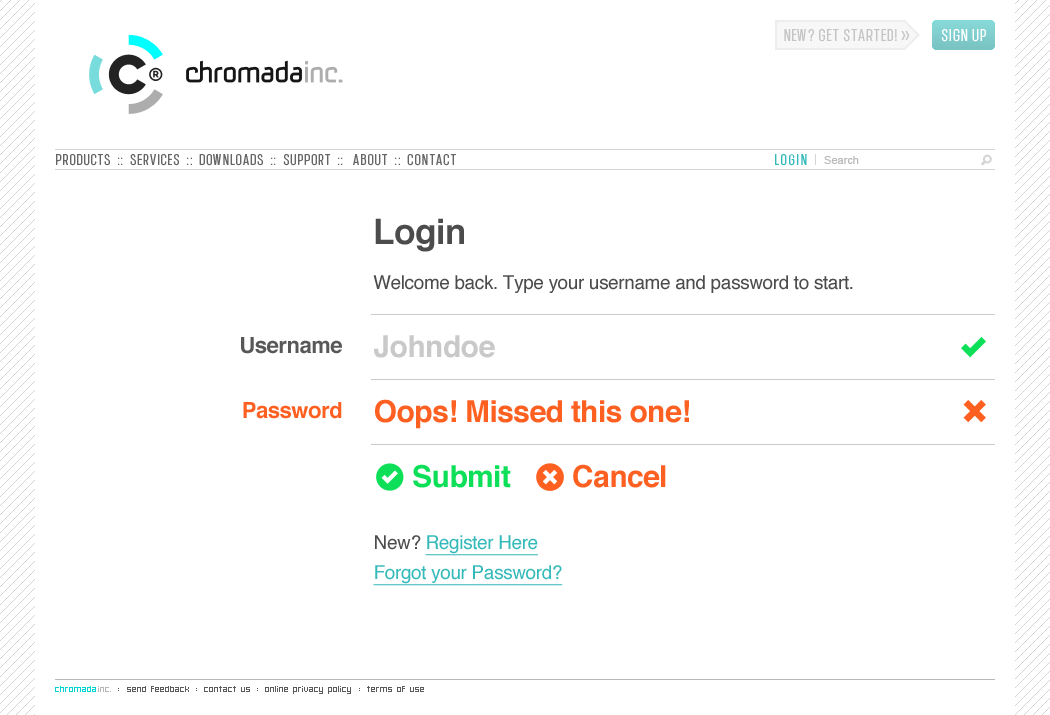
<style>
.page{position:relative;width:1050px;height:715px;background:#ffffff}
.page>*{position:absolute;margin:0}
.t1{font:17px "ChromadicaCondensed";letter-spacing:0.06em;color:#c4c4c4}
.t2{font:17px "ChromadicaCondensed";letter-spacing:0.06em;color:#ffffff}
.t3{font:15px "ChromadicaCondensed";letter-spacing:0.08em;color:#676666}
.t4{font:15px "ChromadicaCondensed";letter-spacing:0.1em;color:#35b9b9}
.t5{font:15px "ChromadicaCondensed";letter-spacing:0.12em;color:#35b9b9}
.t6{font:15px "ChromadicaCondensed";letter-spacing:0.18em;color:#35b9b9}
.t7{font:15px "ChromadicaCondensed";color:#35b9b9}
.t8{font:11px "ArialMT";color:#b9b9b9}
.t9{font:19px/24px "Helvetica";letter-spacing:-0.02em;color:#4c4c4c}
.t10{font:35px/30px "Helvetica-Bold";letter-spacing:-0.01em;color:#4c4c4c}
.t11{font:22px/65px "Helvetica-Bold";letter-spacing:-0.02em;color:#585858}
.t12{font:22px/65px "Helvetica-Bold";letter-spacing:-0.02em;color:#fe6022}
.t13{font:19px/30px "Helvetica";letter-spacing:-0.02em;color:#35b9b9;text-decoration:underline}
.t14{font:30px/65px "Helvetica-Bold";letter-spacing:-0.02em;color:#c9c9c9}
.t15{font:30px/65px "Helvetica-Bold";letter-spacing:-0.02em;color:#fe6022}
.t16{font:30px/65px "Helvetica-Bold";letter-spacing:-0.02em;color:#0edf58}
.t17{font:19px/30px "Helvetica";letter-spacing:-0.02em;color:#4c4c4c}
</style>
<div class="page">
<p class="t1" style="left:784px;top:28px;width:202px;height:14px">NEW? GET STARTED! &gt;&gt;          <span class="t2">SIGN UP</span></p>
<p class="t3" style="left:56px;top:154px;width:803px;height:12px">PRODUCTS  ::  SERVICES  ::  DOWNLOADS  ::  SUPPORT  ::   ABOUT  ::  CONTACT                                                                                                    <span class="t4">LO</span><span class="t5">G</span><span class="t6">I</span><span class="t7">N    </span><span class="t8">Search</span></p>
<p class="t9" style="left:373px;top:218px;width:480px;height:75px"><span class="t10">Login<br> <br></span>Welcome back. Type your username and password to start.</p>
<p class="t11" style="left:241px;top:337px;width:101px;height:82px;text-align:right">Username<br><span class="t12">Password</span></p>
<p class="t13" style="left:373px;top:335px;width:316px;height:251px"><span class="t14">Johndoe<br></span><span class="t15">Oops! Missed this one!<br>     </span><span class="t16">Submit        </span><span class="t15">Cancel<br> <br></span><span class="t17">New? </span>Register Here<br>Forgot your Password?</p>
</div>
